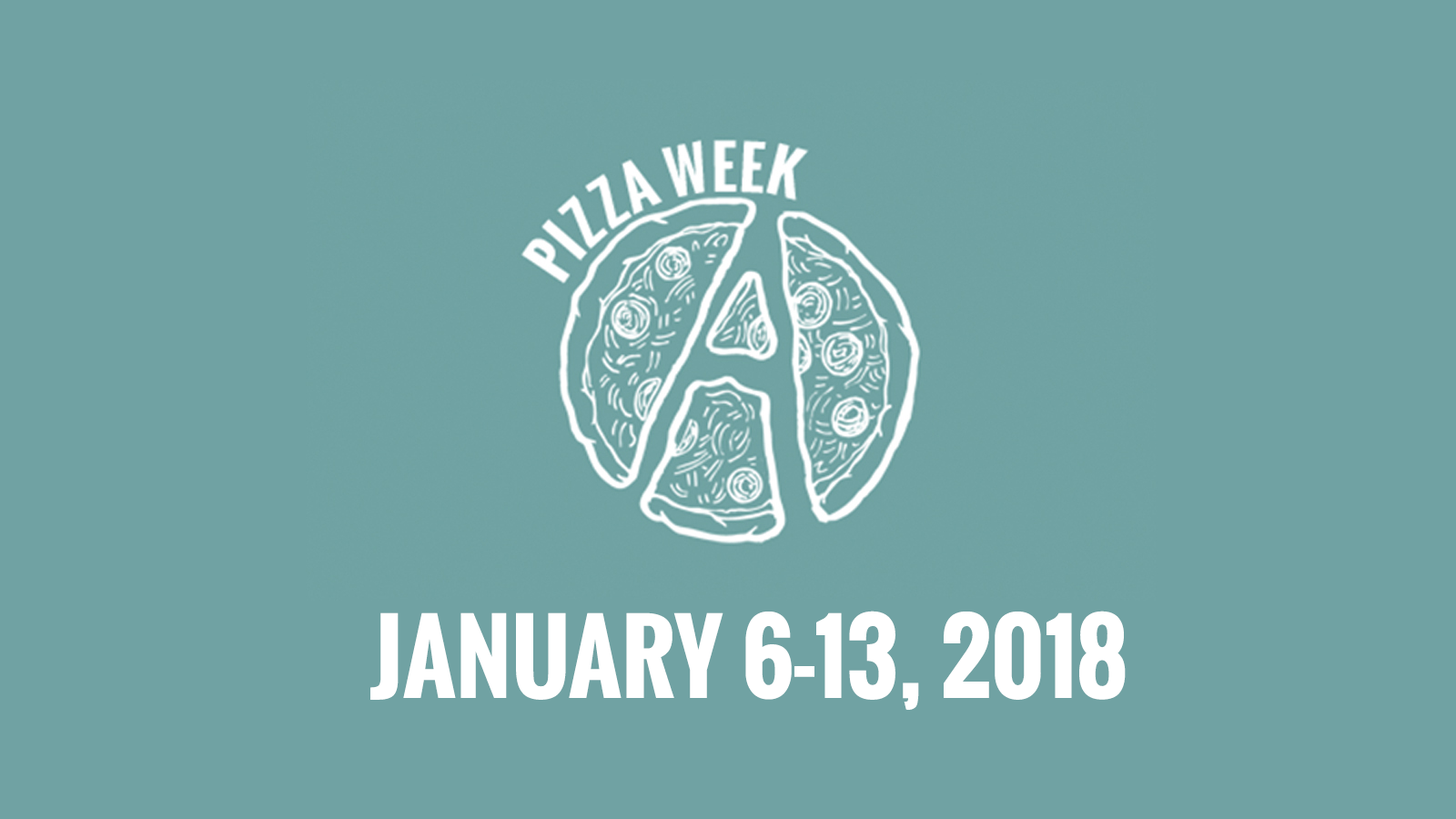
<style>
.page{position:relative;width:1456px;height:819px;background:#70a2a3}
.page>*{position:absolute;margin:0}
.t1{font:96.5px "Oswald-Bold";color:#ffffff;text-transform:uppercase}
</style>
<div class="page">
<p class="t1" style="left:370px;top:611px;width:756px;height:99px">January 6-13, 2018</p>
</div>
